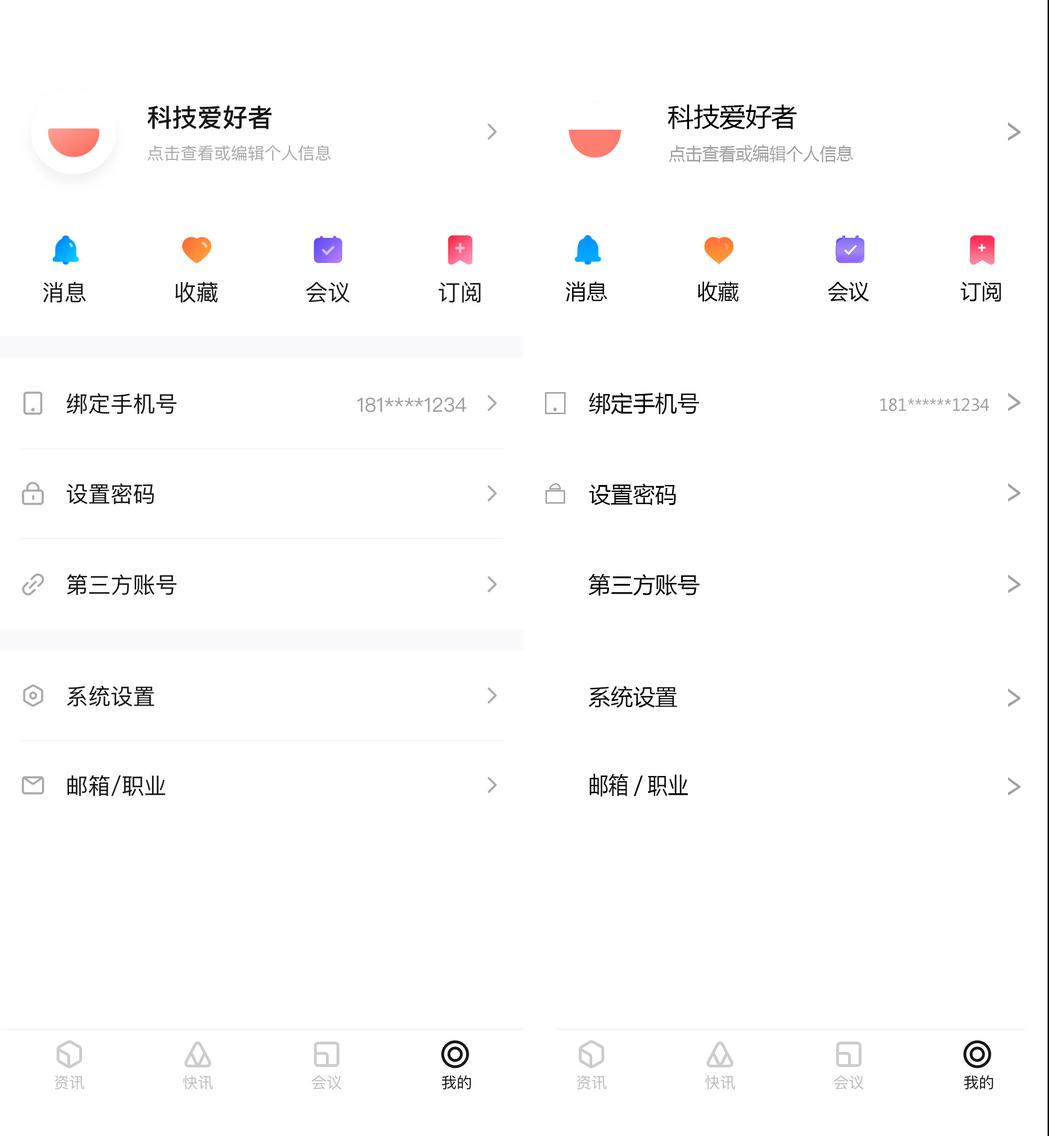
<style>
.page{position:relative;width:1049px;height:1136px;background:#ffffff}
.page>*{position:absolute;margin:0}
.t1{font:25.6px "MicrosoftYaHei";color:#000000}
.t2{font:36.5px "MicrosoftYaHei";color:#a2a1a1;scale:0.74 1}
.t3{font:17.6px "MicrosoftYaHei";color:#a2a1a1;scale:0.95 1}
.t4{font:21px "MicrosoftYaHei";color:#050505}
.t5{font:22.2px "MicrosoftYaHei";color:#050505}
.t6{font:16.3px "MicrosoftYaHei";color:#a0a0a0}
.t7{font:23.1px "MicrosoftYaHei";color:#050505;scale:0.88 1}
</style>
<div class="page">
<p class="t1" style="left:668px;top:104px;width:129px;height:26px">科技爱好者</p>
<p class="t2" style="left:1008px;top:122px;width:13px;height:19px">&gt;</p>
<p class="t2" style="left:1008px;top:122px;width:13px;height:19px">&gt;</p>
<p class="t3" style="left:669px;top:145px;width:185px;height:17px">点击查看或编辑个人信息</p>
<p class="t4" style="left:566px;top:281px;width:42px;height:21px">消息</p>
<p class="t4" style="left:698px;top:281px;width:41px;height:21px">收藏</p>
<p class="t4" style="left:828px;top:281px;width:41px;height:21px">会议</p>
<p class="t4" style="left:961px;top:281px;width:40px;height:21px">订阅</p>
<p class="t5" style="left:589px;top:393px;width:111px;height:22px">绑定手机号</p>
<p class="t6" style="left:881px;top:398px;width:108px;height:13px">181******1234</p>
<p class="t2" style="left:1008px;top:393px;width:13px;height:18px">&gt;</p>
<p class="t5" style="left:590px;top:484px;width:86px;height:21px">设置密码</p>
<p class="t2" style="left:1008px;top:483px;width:13px;height:19px">&gt;</p>
<p class="t5" style="left:589px;top:574px;width:111px;height:22px">第三方账号</p>
<p class="t2" style="left:1008px;top:575px;width:13px;height:18px">&gt;</p>
<p class="t5" style="left:589px;top:686px;width:88px;height:22px">系统设置</p>
<p class="t2" style="left:1008px;top:688px;width:13px;height:19px">&gt;</p>
<p class="t7" style="left:590px;top:774px;width:98px;height:23px">邮箱/职业</p>
<p class="t2" style="left:1008px;top:777px;width:13px;height:19px">&gt;</p>
</div>
